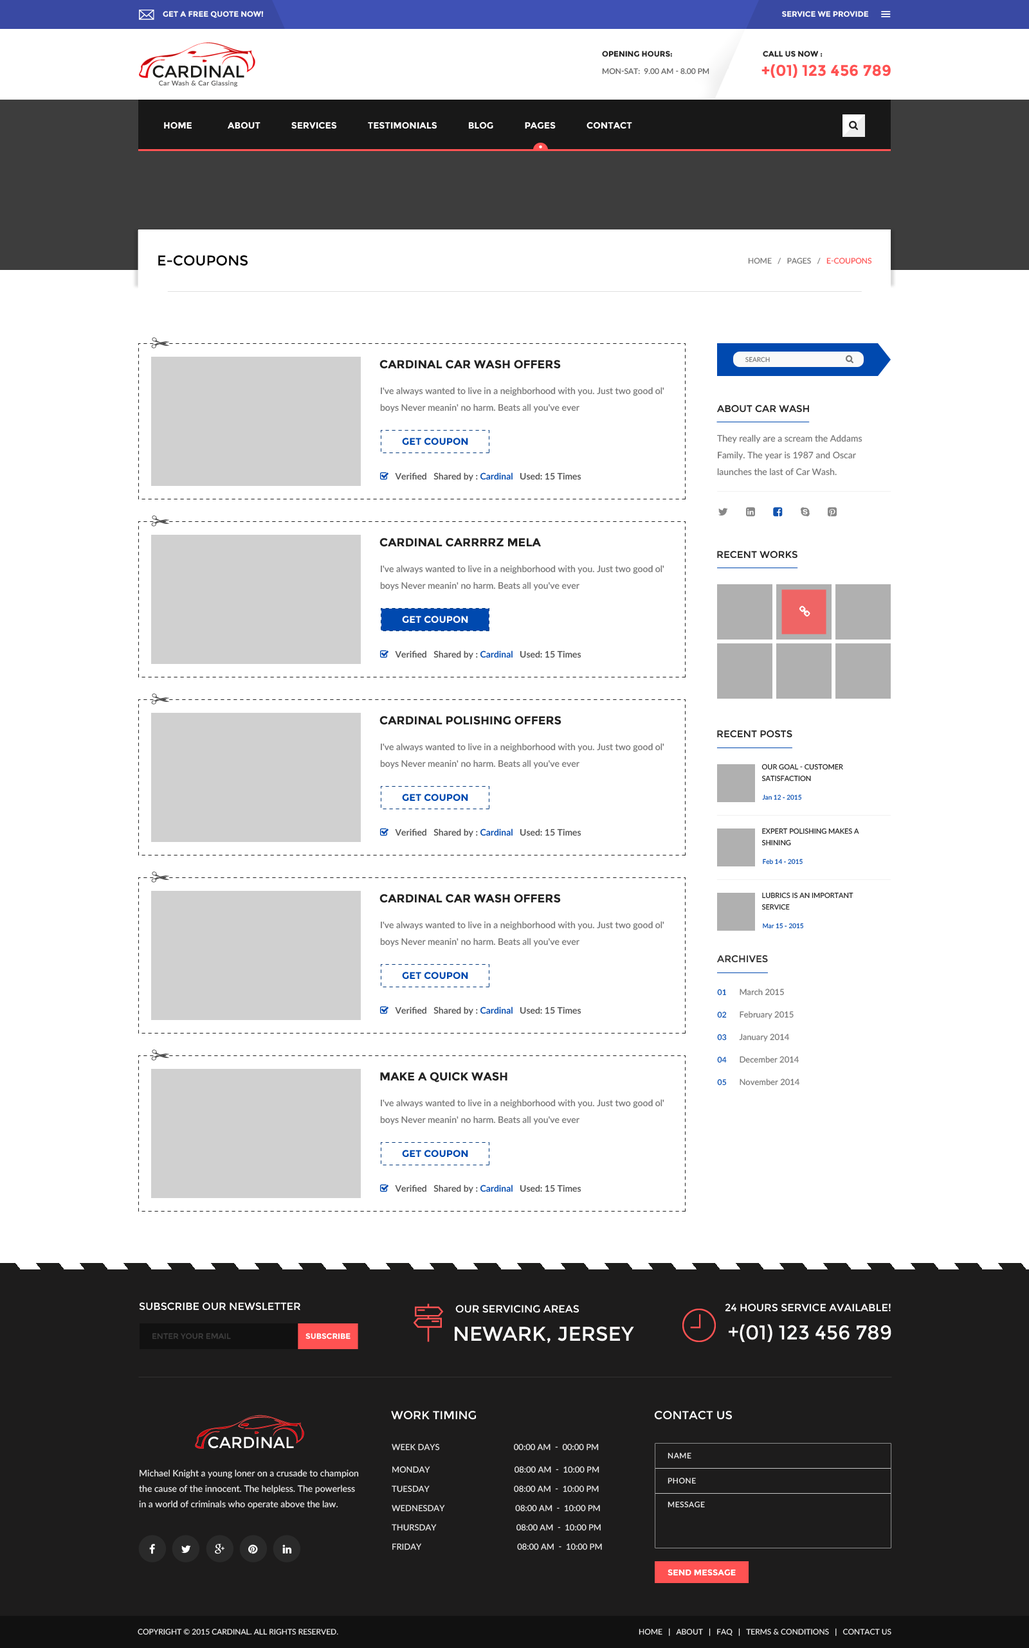
<style>
.page{position:relative;width:1029px;height:1648px;background:#ffffff}
.page>*{position:absolute;margin:0}
.t1{font:7.7px "Montserrat-Bold";color:#fbfbfb;text-transform:uppercase}
.t2{font:7.7px "Montserrat-Bold";color:#232323;text-transform:uppercase}
.t3{font:15.4px "Montserrat-Bold";color:#ff5252;text-transform:uppercase}
.t4{font:7.7px "Lato-Medium";color:#666666;text-transform:uppercase}
.t5{font:9px "Montserrat-Bold";color:#fffefe;text-transform:uppercase}
.t6{font:14.1px "Montserrat-Regular";color:#000000;text-transform:uppercase}
.t7{font:7.7px "Lato-Regular";color:#777777;text-transform:uppercase}
.t8{font:7.7px "Lato-Regular";color:#ff5252;text-transform:uppercase}
.t9{font:11.6px "Montserrat-Bold";color:#222222;text-transform:uppercase}
.t10{font:6.4px "Lato-Regular";color:#777777;text-transform:uppercase}
.t11{font:9px/16.7px "Lato-Medium";color:#777777}
.t12{font:9.6px "Montserrat-Regular";color:#222222;text-transform:uppercase}
.t13{font:9.6px "Montserrat-Bold";color:#0049af;text-transform:uppercase}
.t14{font:9px/16.7px "Lato-Regular";color:#777777}
.t15{font:9.6px "Montserrat-Bold";color:#ffffff;text-transform:uppercase}
.t16{font:7.1px/11.6px "Lato-Regular";color:#222222;text-transform:uppercase}
.t17{font:6.4px "Lato-Regular";color:#0049af}
.t18{font:6.4px "Lato-Regular"}
.t19{font:9.6px "Montserrat-Regular";color:#313131;text-transform:uppercase}
.t20{font:7.7px/22.5px "Lato-Regular";letter-spacing:0.04em;color:#0049af}
.t21{font:8.4px/22.5px "Lato-Regular";color:#777777}
.t22{font:10.3px "Montserrat-Regular";color:#ffffff;text-transform:uppercase}
.t23{font:19.9px "Montserrat-Regular";color:#ffffff;text-transform:uppercase}
.t24{font:7.7px "Montserrat-Regular";color:#3f3f3f;text-transform:uppercase}
.t25{font:7.7px "Montserrat-Bold";color:#ffffff;text-transform:uppercase}
.t26{font:11.6px "Montserrat-Regular";color:#ffffff;text-transform:uppercase}
.t27{font:8.4px "Lato-Medium";color:#e8e8e8;text-transform:uppercase}
.t28{font:7.7px "Lato-Medium";letter-spacing:0.04em;color:#eeeeee;text-transform:uppercase}
.t29{font:9px/15.4px "Lato-Medium";color:#e8e8e8}
.t30{font:8.4px "Lato-Medium";color:#e8e8e8}
.t31{font:8.4px "Montserrat-Bold";color:#ffffff;text-transform:uppercase}
.t32{font:7.7px "Lato-Regular";color:#eeeeee;text-transform:uppercase}
</style>
<div class="page">
<p class="t1" style="left:782px;top:11px;width:87px;height:6px">service we provide</p>
<p class="t2" style="left:602px;top:51px;width:70px;height:6px">OPENING HOURS:</p>
<p class="t2" style="left:762px;top:51px;width:60px;height:6px">Call us now :</p>
<p class="t3" style="left:761px;top:64px;width:129px;height:14px">+(01) 123 456 789</p>
<p class="t4" style="left:602px;top:68px;width:107px;height:7px">MON-SAT:  9.00 AM - 8.00 Pm</p>
<p class="t5" style="left:164px;top:122px;width:468px;height:7px">Home             About             Services             Testimonials             Blog             pAGES             Contact</p>
<p class="t6" style="left:158px;top:255px;width:90px;height:11px">E-Coupons</p>
<p class="t7" style="left:748px;top:258px;width:124px;height:6px">Home   /   Pages   /   <span class="t8">E-Coupons</span></p>
<p class="t9" style="left:379px;top:360px;width:182px;height:9px">cardinal car wash offers</p>
<p class="t10" style="left:745px;top:357px;width:25px;height:6px">Search</p>
<p class="t11" style="left:380px;top:387px;width:284px;height:26px">I've always wanted to live in a neighborhood with you. Just two good ol' boys Never meanin' no harm. Beats all you've ever</p>
<p class="t12" style="left:717px;top:405px;width:92px;height:8px">About Car Wash</p>
<p class="t13" style="left:402px;top:438px;width:66px;height:7px">get coupon</p>
<p class="t14" style="left:717px;top:435px;width:145px;height:41px">They really are a scream the Addams Family. The year is 1987 and Oscar launches the last of Car Wash.</p>
<p class="t9" style="left:379px;top:538px;width:162px;height:9px">cardinal carrrrz mela</p>
<p class="t12" style="left:717px;top:551px;width:80px;height:8px">Recent Works</p>
<p class="t11" style="left:380px;top:565px;width:284px;height:26px">I've always wanted to live in a neighborhood with you. Just two good ol' boys Never meanin' no harm. Beats all you've ever</p>
<p class="t15" style="left:402px;top:616px;width:66px;height:7px">get coupon</p>
<p class="t9" style="left:379px;top:716px;width:182px;height:9px">cardinal polishing offers</p>
<p class="t12" style="left:717px;top:730px;width:75px;height:8px">Recent Posts</p>
<p class="t11" style="left:380px;top:743px;width:284px;height:26px">I've always wanted to live in a neighborhood with you. Just two good ol' boys Never meanin' no harm. Beats all you've ever</p>
<p class="t16" style="left:761px;top:764px;width:82px;height:18px">Our Goal - Customer Satisfaction</p>
<p class="t13" style="left:402px;top:794px;width:66px;height:7px">get coupon</p>
<p class="t17" style="left:762px;top:795px;width:39px;height:5px">Jan 12 - 2015</p>
<p class="t16" style="left:762px;top:828px;width:97px;height:18px">Expert Polishing Makes a Shining</p>
<p class="t17" style="left:762px;top:859px;width:40px;height:6px">Feb 14 - 2015</p>
<p class="t16" style="left:762px;top:892px;width:91px;height:18px">Lubrics is An Important<br>Service</p>
<p class="t9" style="left:379px;top:894px;width:182px;height:9px">cardinal car wash offers</p>
<p class="t11" style="left:380px;top:921px;width:284px;height:26px">I've always wanted to live in a neighborhood with you. Just two good ol' boys Never meanin' no harm. Beats all you've ever</p>
<p class="t18" style="left:762px;top:923px;width:41px;height:6px">Mar 15 - 2015</p>
<p class="t19" style="left:717px;top:955px;width:51px;height:8px">Archives</p>
<p class="t13" style="left:402px;top:972px;width:66px;height:7px">get coupon</p>
<p class="t20" style="left:717px;top:989px;width:9px;height:97px">01<br>02<br>03<br>04<br>05</p>
<p class="t21" style="left:739px;top:989px;width:61px;height:97px">March 2015<br>February 2015<br>January 2014<br>December 2014<br>November 2014</p>
<p class="t9" style="left:380px;top:1072px;width:127px;height:11px">make a quick wash</p>
<p class="t11" style="left:380px;top:1099px;width:284px;height:26px">I've always wanted to live in a neighborhood with you. Just two good ol' boys Never meanin' no harm. Beats all you've ever</p>
<p class="t13" style="left:402px;top:1150px;width:66px;height:7px">get coupon</p>
<p class="t22" style="left:139px;top:1302px;width:161px;height:9px">subscribe our newsletter</p>
<p class="t22" style="left:455px;top:1305px;width:124px;height:8px">OUR SERVICING AREAS</p>
<p class="t22" style="left:724px;top:1304px;width:166px;height:8px">24 HOURS SERVICE AVAILABLE!</p>
<p class="t23" style="left:728px;top:1324px;width:163px;height:18px">+(01) 123 456 789</p>
<p class="t24" style="left:152px;top:1333px;width:79px;height:7px">enter your email</p>
<p class="t25" style="left:305px;top:1333px;width:45px;height:7px">Subscribe</p>
<p class="t23" style="left:455px;top:1326px;width:179px;height:18px">Newark, Jersey</p>
<p class="t26" style="left:391px;top:1410px;width:85px;height:10px">Work Timing</p>
<p class="t26" style="left:654px;top:1410px;width:78px;height:10px">contact us</p>
<p class="t27" style="left:392px;top:1444px;width:206px;height:7px">Week Days                                   00:00 am  -  00:00 pm</p>
<p class="t28" style="left:667px;top:1453px;width:24px;height:6px">Name</p>
<p class="t29" style="left:139px;top:1470px;width:220px;height:39px">Michael Knight a young loner on a crusade to champion the cause of the innocent. The helpless. The powerless in a world of criminals who operate above the law.</p>
<p class="t27" style="left:392px;top:1466px;width:207px;height:7px"><span class="t30">MONDAY                                     </span>08:00 am  -  10:00 pm</p>
<p class="t28" style="left:667px;top:1478px;width:29px;height:6px">Phone</p>
<p class="t27" style="left:392px;top:1486px;width:206px;height:7px"><span class="t30">TUESDAY                                     </span>08:00 am  -  10:00 pm</p>
<p class="t27" style="left:392px;top:1505px;width:208px;height:7px"><span class="t30">WEDNESDAY                               </span>08:00 am  -  10:00 pm</p>
<p class="t28" style="left:667px;top:1502px;width:38px;height:6px">Message</p>
<p class="t27" style="left:392px;top:1524px;width:208px;height:7px"><span class="t30">THURSDAY                                   </span>08:00 am  -  10:00 pm</p>
<p class="t27" style="left:392px;top:1544px;width:210px;height:7px"><span class="t30">FRIDAY                                          </span>08:00 am  -  10:00 pm</p>
<p class="t31" style="left:667px;top:1569px;width:68px;height:7px">Send message</p>
<p class="t32" style="left:138px;top:1629px;width:200px;height:6px">Copyright © 2015 CARDINAL. All Rights Reserved.</p>
<p class="t32" style="left:638px;top:1628px;width:253px;height:9px">Home   |   About   |   FAQ   |   Terms &amp; Conditions   |   Contact Us</p>
</div>
